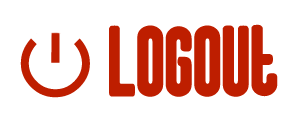
<style>
.page{position:relative;width:300px;height:122px;background:#ffffff}
.page>*{position:absolute;margin:0}
.t1{font:65.3px "sugar";color:#be1e00}
</style>
<div class="page">
<p class="t1" style="left:109px;top:24px;width:169px;height:73px">Logout</p>
</div>
